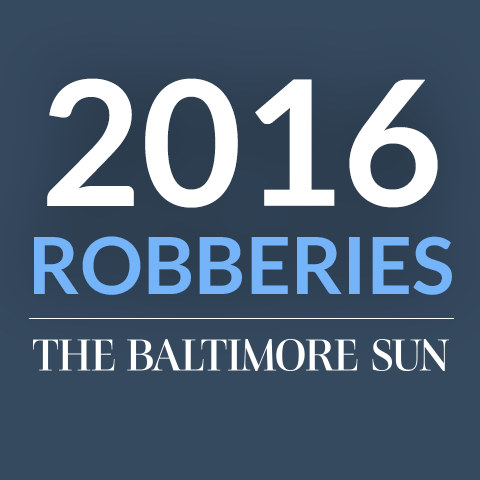
<style>
.page{position:relative;width:480px;height:480px;background:#35495f}
.page>*{position:absolute;margin:0}
.t1{font:78.8px/88.2px "Lato-Bold";color:#75b4f9}
.t2{font:174px/119.2px "Lato-Bold";color:#ffffff}
</style>
<div class="page">
<p class="t1" style="left:34px;top:78px;width:418px;height:217px;text-align:center"><span class="t2">2016<br></span>ROBBERIES</p>
</div>
